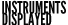
<style>
.page{position:relative;width:68px;height:25px;background:#ffffff}
.page>*{position:absolute;margin:0}
.t1{font:17px "LeagueGothic";color:#060606}
</style>
<div class="page">
<p class="t1" style="left:2px;top:0px;width:64px;height:14px">INSTRUMENTS</p>
<p class="t1" style="left:2px;top:12px;width:50px;height:14px">DISPLAYED</p>
</div>
